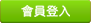
<style>
.page{position:relative;width:91px;height:23px}
.page>*{position:absolute;margin:0}
.t1{font:12.1px "HiraginoSansGB-W3";font-weight:bold}
.t2{font:12.1px "HiraginoSansGB-W3";color:#ffffff;font-weight:bold}
</style>
<div class="page">
<p class="t1" style="left:21px;top:5px;width:50px;height:12px">註冊會員</p>
<p class="t2" style="left:21px;top:5px;width:49px;height:12px">會員登入</p>
</div>
